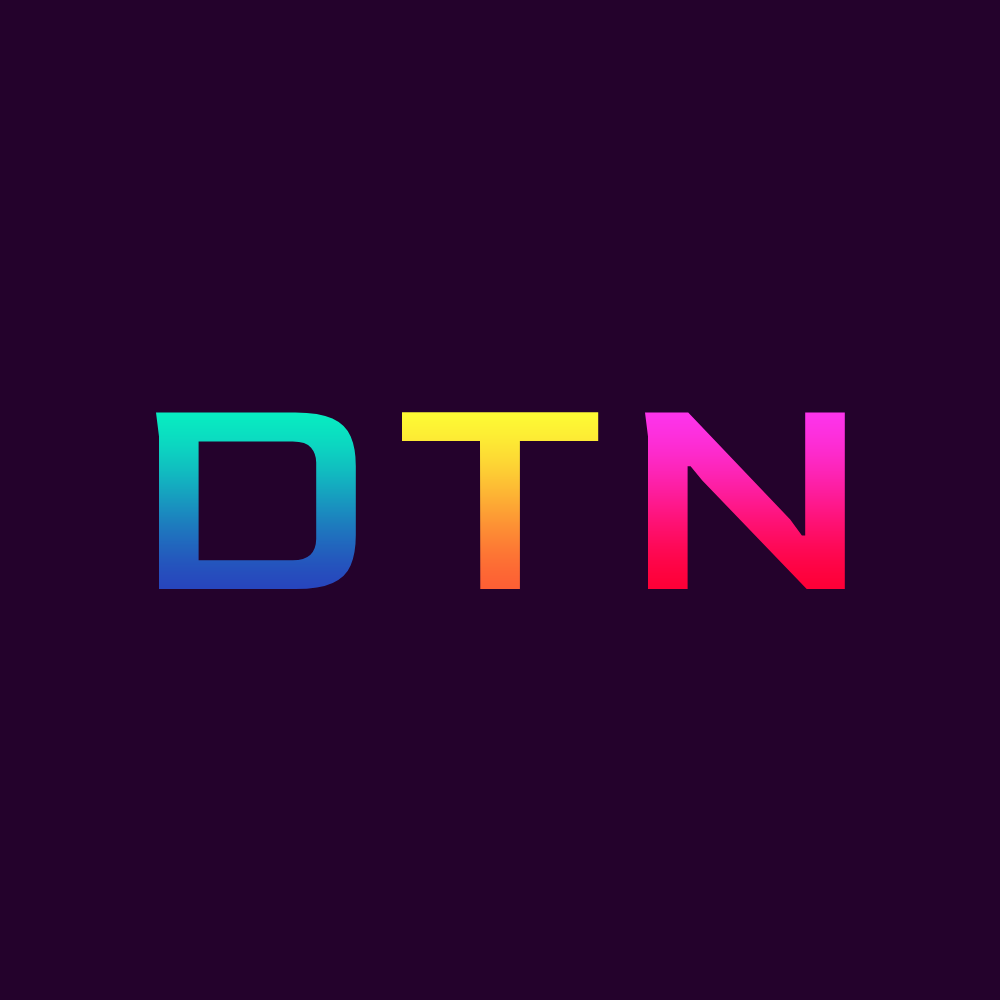
<style>
.page{position:relative;width:1000px;height:1000px;background:#24022c}
.page>*{position:absolute;margin:0}
.t1{font:300px "Goldman-Regular"}
</style>
<div class="page">
<p class="t1" style="left:156px;top:412px;width:200px;height:177px">D</p>
<p class="t1" style="left:402px;top:412px;width:197px;height:177px">T</p>
<p class="t1" style="left:645px;top:412px;width:200px;height:177px">N</p>
</div>
